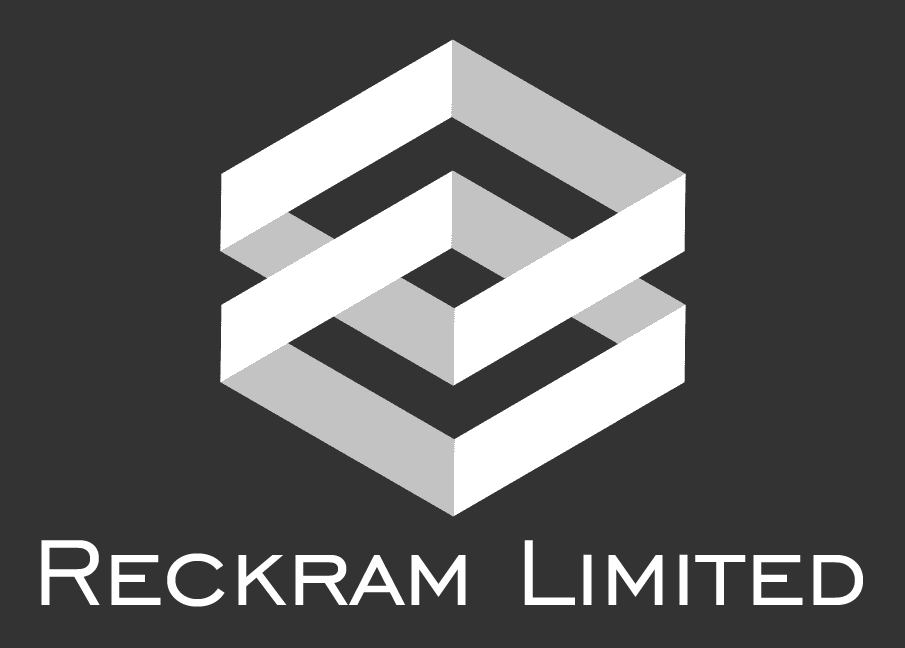
<style>
.page{position:relative;width:905px;height:648px;background:#333333}
.page>*{position:absolute;margin:0}
.t1{font:120px "EngraversGothicBT-Regular";color:#ffffff}
</style>
<div class="page">
<p class="t1" style="left:41px;top:540px;width:822px;height:67px">Reckram Limited</p>
</div>
